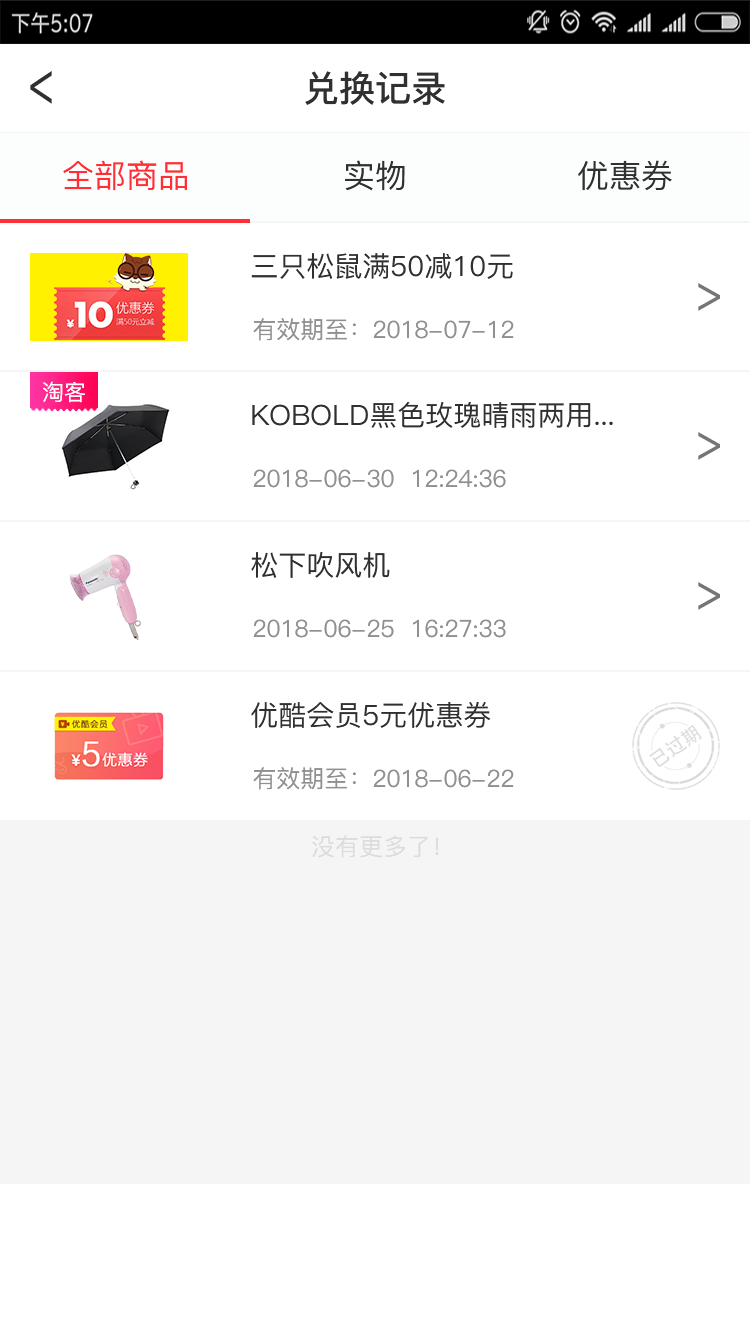
<style>
.page{position:relative;width:750px;height:1334px;background:#ffffff}
.page>*{position:absolute;margin:0}
.t1{font:64.6px "PingFang-SC-Medium";color:#303030;scale:0.66 1}
.t2{font:36px "PingFang-SC-Bold";color:#303030}
.t3{font:32px "PingFang-SC-Medium";color:#ff3035}
.t4{font:32px "PingFang-SC-Medium";color:#303030}
.t5{font:28px "PingFang-SC-Medium";color:#303030}
.t6{font:54.5px "PingFang-SC-Medium";color:#757575;scale:0.8 1}
.t7{font:24px "PingFang-SC-Medium";color:#909090}
.t8{font:24px "PingFang-SC-Medium";color:#dcdcdc}
</style>
<div class="page">
<p class="t1" style="left:30px;top:71px;width:22px;height:33px;rotate:180deg">&gt;</p>
<p class="t2" style="left:305px;top:71px;width:140px;height:34px">兑换记录</p>
<p class="t3" style="left:63px;top:160px;width:124px;height:31px">全部商品</p>
<p class="t4" style="left:345px;top:160px;width:60px;height:31px">实物</p>
<p class="t4" style="left:578px;top:160px;width:94px;height:31px">优惠券</p>
<p class="t5" style="left:251px;top:253px;width:262px;height:26px">三只松鼠满50减10元</p>
<p class="t6" style="left:698px;top:283px;width:22px;height:28px">&gt;</p>
<p class="t7" style="left:253px;top:318px;width:261px;height:23px">有效期至：2018-07-12</p>
<p class="t5" style="left:252px;top:402px;width:361px;height:26px">KOBOLD黑色玫瑰晴雨两用...</p>
<p class="t6" style="left:698px;top:432px;width:22px;height:28px">&gt;</p>
<p class="t7" style="left:253px;top:469px;width:253px;height:19px">2018-06-30  12:24:36</p>
<p class="t5" style="left:251px;top:552px;width:139px;height:26px">松下吹风机</p>
<p class="t6" style="left:698px;top:582px;width:22px;height:28px">&gt;</p>
<p class="t7" style="left:253px;top:619px;width:253px;height:19px">2018-06-25  16:27:33</p>
<p class="t5" style="left:251px;top:702px;width:240px;height:26px">优酷会员5元优惠券</p>
<p class="t7" style="left:253px;top:767px;width:261px;height:23px">有效期至：2018-06-22</p>
<p class="t8" style="left:312px;top:835px;width:127px;height:23px">没有更多了！</p>
</div>
